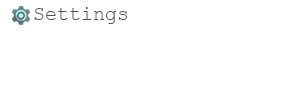
<style>
.page{position:relative;width:304px;height:106px;background:#ffffff}
.page>*{position:absolute;margin:0}
.t1{font:20px "CourierNewPSMT";color:#535353}
</style>
<div class="page">
<p class="t1" style="left:34px;top:7px;width:93px;height:17px">Settings</p>
</div>
